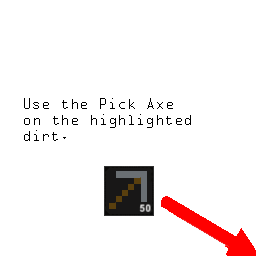
<style>
.page{position:relative;width:256px;height:256px;background:#ffffff}
.page>*{position:absolute;margin:0}
.t1{font:13.3px "OCRAStd";color:#000000}
</style>
<div class="page">
<p class="t1" style="left:24px;top:98px;width:167px;height:43px">Use the Pick Axe<br>on the highlighted<br>dirt.</p>
</div>
